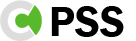
<style>
.page{position:relative;width:136px;height:41px;background:#ffffff}
.page>*{position:absolute;margin:0}
.t1{font:42.8px "FranklinGothic-Demi";color:#000000}
</style>
<div class="page">
<p class="t1" style="left:51px;top:6px;width:73px;height:31px">PSS</p>
</div>
